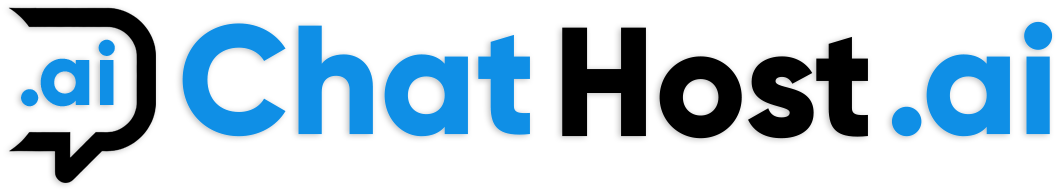
<style>
.page{position:relative;width:1059px;height:191px;background:#ffffff}
.page>*{position:absolute;margin:0}
.t1{font:154.8px "Gilroy-ExtraBold";color:#0f8fe6}
.t2{font:154.8px "Gilroy-ExtraBold";color:#000000}
.t3{font:90.2px "Gilroy-ExtraBold";color:#0f8fe6}
</style>
<div class="page">
<p class="t1" style="left:182px;top:21px;width:871px;height:116px">Chat         .ai</p>
<p class="t2" style="left:562px;top:27px;width:306px;height:112px">Host</p>
<p class="t3" style="left:21px;top:39px;width:94px;height:68px">.ai</p>
</div>
